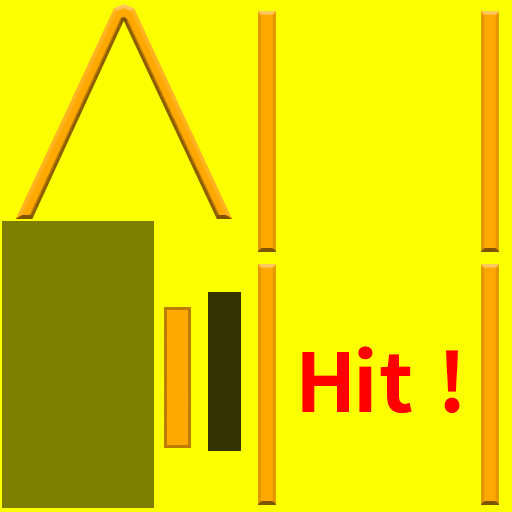
<style>
.page{position:relative;width:512px;height:512px;background:#fcff00}
.page>*{position:absolute;margin:0}
.t1{font:81.2px "Nasu-Bold";letter-spacing:0.08em;color:#ff0000}
</style>
<div class="page">
<p class="t1" style="left:302px;top:346px;width:158px;height:68px">Hit !</p>
</div>
